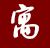
<style>
.page{position:relative;width:50px;height:48px;background:#7d0000}
.page>*{position:absolute;margin:0}
.t1{font:32.4px "Ò¶¸ùÓÑÃ«±ÊÐÐÊé¼òÌå";letter-spacing:0.2em;color:#ffffff}
</style>
<div class="page">
<p class="t1" style="left:11px;top:4px;width:28px;height:35px">寓</p>
</div>
